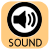
<style>
.page{position:relative;width:50px;height:50px;background:#ffcb80}
.page>*{position:absolute;margin:0}
.t1{font:11px "TrebuchetMS";color:#070707}
</style>
<div class="page">
<p class="t1" style="left:9px;top:38px;width:33px;height:9px">SOUND</p>
</div>
